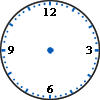
<style>
.page{position:relative;width:100px;height:100px;background:#ffffff}
.page>*{position:absolute;margin:0}
.t1{font:11px "TimesNewRomanPSMT";color:#000000;font-weight:bold}
</style>
<div class="page">
<p class="t1" style="left:44px;top:8px;width:12px;height:8px">12</p>
<p class="t1" style="left:8px;top:46px;width:6px;height:8px">9</p>
<p class="t1" style="left:86px;top:46px;width:6px;height:8px">3</p>
<p class="t1" style="left:47px;top:85px;width:6px;height:8px">6</p>
</div>
